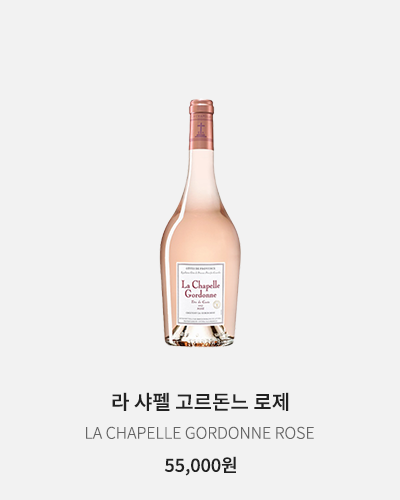
<style>
.page{position:relative;width:400px;height:500px;background:#f2f2f2}
.page>*{position:absolute;margin:0}
.t1{font:20px "NotoSansKR-Medium";color:#222222}
.t2{font:16px "NotoSansKR-Light";color:#666666}
.t3{font:18px "NotoSansKR-Medium";color:#222222}
</style>
<div class="page">
<p class="t1" style="left:112px;top:392px;width:177px;height:19px">라 샤펠 고르돈느 로제</p>
<p class="t2" style="left:86px;top:426px;width:228px;height:13px">LA CHAPELLE GORDONNE ROSE</p>
<p class="t3" style="left:164px;top:456px;width:72px;height:20px">55,000원</p>
</div>
